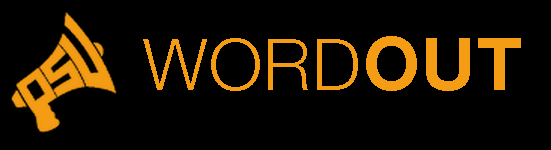
<style>
.page{position:relative;width:551px;height:150px;background:#000000}
.page>*{position:absolute;margin:0}
.t1{font:71px "HelveticaNeue-Light";letter-spacing:0.025em;color:#f49c14}
.t2{font:73px "HelveticaNeue-Bold";letter-spacing:0.025em;color:#f49c14}
</style>
<div class="page">
<p class="t1" style="left:143px;top:36px;width:378px;height:55px">WORD<span class="t2">OUT</span></p>
</div>
